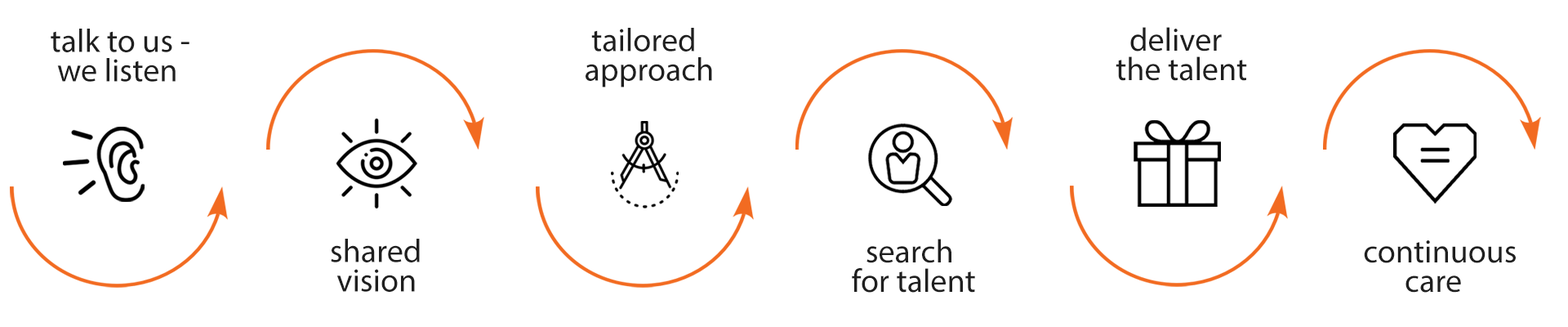
<style>
.page{position:relative;width:1568px;height:327px;background:#ffffff}
.page>*{position:absolute;margin:0}
.t1{font:32.7px/29.4px "MyriadPro-Regular";color:#1f1f1f}
</style>
<div class="page">
<p class="t1" style="left:51px;top:29px;width:138px;height:53px">talk to us - <br> we listen</p>
<p class="t1" style="left:586px;top:28px;width:126px;height:59px">tailored <br>approach</p>
<p class="t1" style="left:1116px;top:27px;width:131px;height:54px">deliver <br>the talent</p>
<p class="t1" style="left:331px;top:238px;width:89px;height:54px">shared <br> vision</p>
<p class="t1" style="left:852px;top:238px;width:123px;height:54px">search <br>for talent</p>
<p class="t1" style="left:1364px;top:240px;width:152px;height:52px">continuous <br>      care</p>
</div>
